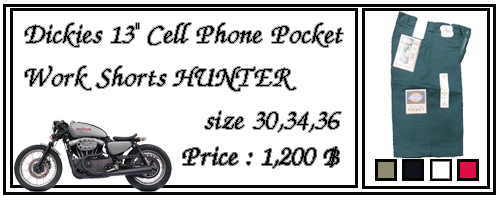
<style>
.page{position:relative;width:500px;height:200px;background:#ffffff}
.page>*{position:absolute;margin:0}
.t1{font:36px "DSUMonTaNa";color:#050505}
</style>
<div class="page">
<p class="t1" style="left:25px;top:23px;width:318px;height:109px">Dickies 13" Cell Phone Pocket <br>Work Shorts HUNTER <br>      size 30,34,36</p>
<p class="t1" style="left:183px;top:147px;width:156px;height:21px">Price : 1,200 ฿</p>
</div>
